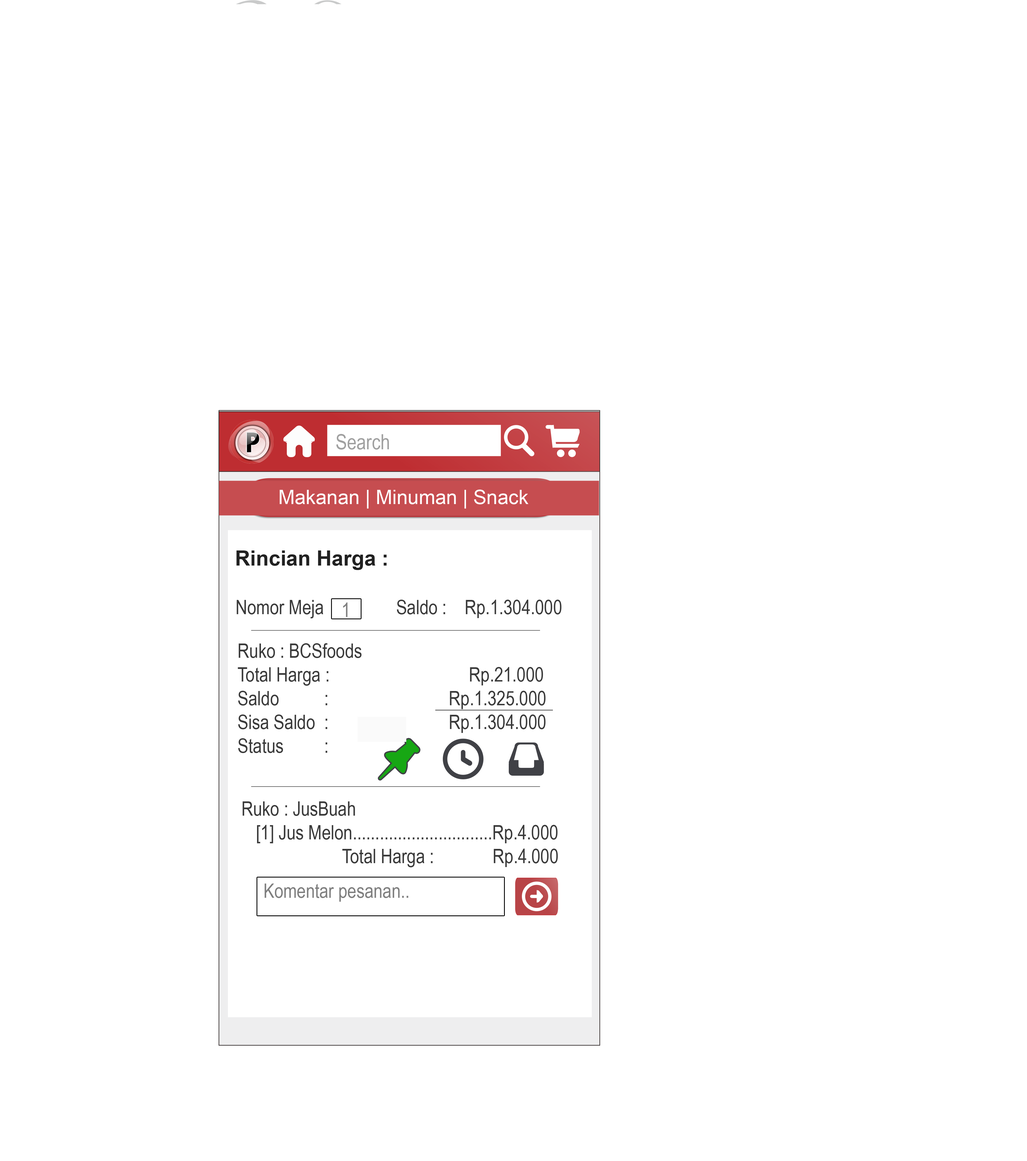
<style>
.page{position:relative;width:1027px;height:1161px;background:#ffffff}
.page>*{position:absolute;margin:0}
.t1{font:21px "ArialNarrow";color:#a0a0a0}
.t2{font:19.8px "ArialMT";color:#fffefe}
.t3{font:21px "Arial-BoldMT";color:#212121}
.t4{font:19.8px "ArialNarrow";color:#3a3a3a}
.t5{font:19.8px "ArialNarrow";color:#7f7f7f}
</style>
<div class="page">
<p class="t1" style="left:336px;top:434px;width:53px;height:16px">Search</p>
<p class="t2" style="left:280px;top:490px;width:249px;height:19px">Makanan | Minuman | Snack</p>
<p class="t3" style="left:236px;top:550px;width:151px;height:20px">Rincian Harga :</p>
<p class="t4" style="left:237px;top:600px;width:325px;height:18px">Nomor Meja                Saldo :    Rp.1.304.000</p>
<p class="t5" style="left:343px;top:602px;width:5px;height:15px">1</p>
<p class="t4" style="left:238px;top:643px;width:308px;height:110px">Ruko : BCSfoods<br>Total Harga :              Rp.21.000<br>Saldo          :            Rp.1.325.000 <br>Sisa Saldo  :            Rp.1.304.000<br>Status         :</p>
<p class="t4" style="left:243px;top:801px;width:315px;height:66px">Ruko : JusBuah<br>  [1] Jus Melon...............................Rp.4.000<br>          Total Harga :             Rp.4.000</p>
<p class="t5" style="left:265px;top:883px;width:143px;height:19px">Komentar pesanan..</p>
</div>
